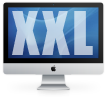
<style>
.page{position:relative;width:108px;height:100px}
.page>*{position:absolute;margin:0}
.t1{font:56px "Impact";letter-spacing:0.05em;color:#bbcfe3}
</style>
<div class="page">
<p class="t1" style="left:12px;top:11px;width:81px;height:44px">XXL</p>
</div>
